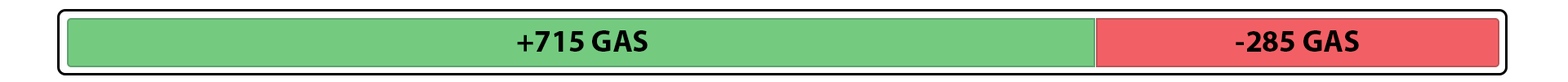
<style>
.page{position:relative;width:1568px;height:82px;background:#74cb80}
.page>*{position:absolute;margin:0}
.t1{font:30.6px "MyriadPro-Bold";color:#000000}
</style>
<div class="page">
<p class="t1" style="left:517px;top:30px;width:131px;height:21px">+715 GAS</p>
<p class="t1" style="left:1236px;top:30px;width:123px;height:21px">-285 GAS</p>
</div>
